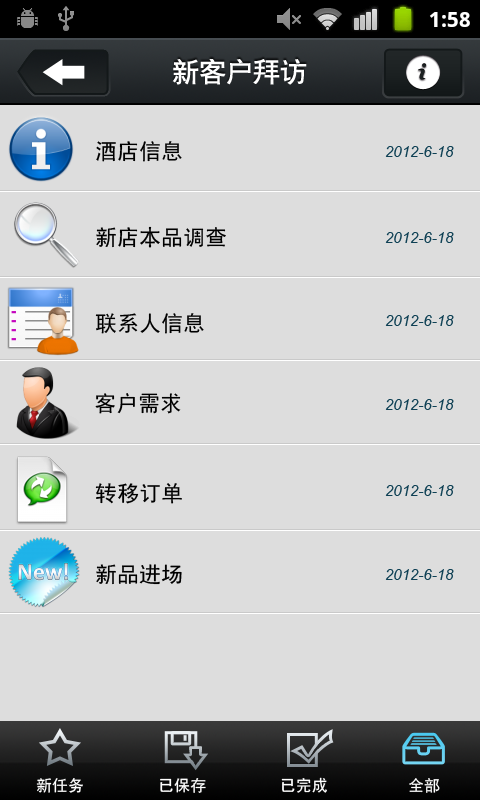
<style>
.page{position:relative;width:480px;height:800px;background:#dddddd}
.page>*{position:absolute;margin:0}
.t1{font:27px "CTCuHeiSJ";color:#ffffff}
.t2{font:22px "SimHei";color:#000000}
.t3{font:15px "Arial-ItalicMT";color:#0e4054}
.t4{font:16px "SimHei";color:#ffffff}
</style>
<div class="page">
<p class="t1" style="left:172px;top:59px;width:135px;height:26px">新客户拜访</p>
<p class="t2" style="left:96px;top:141px;width:86px;height:21px">酒店信息</p>
<p class="t3" style="left:385px;top:146px;width:69px;height:11px">2012-6-18</p>
<p class="t2" style="left:96px;top:226px;width:130px;height:22px">新店本品调查</p>
<p class="t3" style="left:385px;top:232px;width:69px;height:11px">2012-6-18</p>
<p class="t2" style="left:95px;top:313px;width:109px;height:21px">联系人信息</p>
<p class="t3" style="left:385px;top:315px;width:69px;height:11px">2012-6-18</p>
<p class="t2" style="left:95px;top:393px;width:86px;height:21px">客户需求</p>
<p class="t3" style="left:385px;top:399px;width:69px;height:11px">2012-6-18</p>
<p class="t2" style="left:95px;top:483px;width:87px;height:21px">转移订单</p>
<p class="t3" style="left:385px;top:485px;width:69px;height:11px">2012-6-18</p>
<p class="t2" style="left:96px;top:564px;width:86px;height:21px">新品进场</p>
<p class="t3" style="left:385px;top:569px;width:69px;height:11px">2012-6-18</p>
<p class="t4" style="left:36px;top:778px;width:47px;height:15px">新任务</p>
<p class="t4" style="left:160px;top:778px;width:46px;height:15px">已保存</p>
<p class="t4" style="left:281px;top:777px;width:46px;height:16px">已完成</p>
<p class="t4" style="left:409px;top:778px;width:31px;height:15px">全部</p>
</div>
